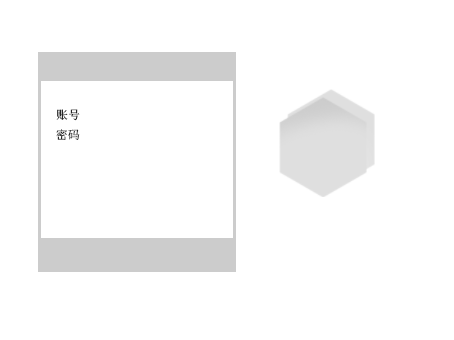
<style>
.page{position:relative;width:454px;height:340px;background:#ffffff}
.page>*{position:absolute;margin:0}
.t1{font:12px "SimSun"}
</style>
<div class="page">
<p class="t1" style="left:56px;top:109px;width:24px;height:12px">账号t</p>
<p class="t1" style="left:56px;top:129px;width:24px;height:11px">密码</p>
</div>
